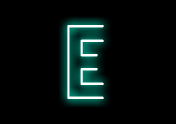
<style>
.page{position:relative;width:176px;height:124px;background:#000000}
.page>*{position:absolute;margin:0}
.t1{font:100px "Lovelo-LineLight";color:#ffffff;text-transform:uppercase;scale:0.92 1}
</style>
<div class="page">
<p class="t1" style="left:67px;top:25px;width:37px;height:74px">E</p>
</div>
